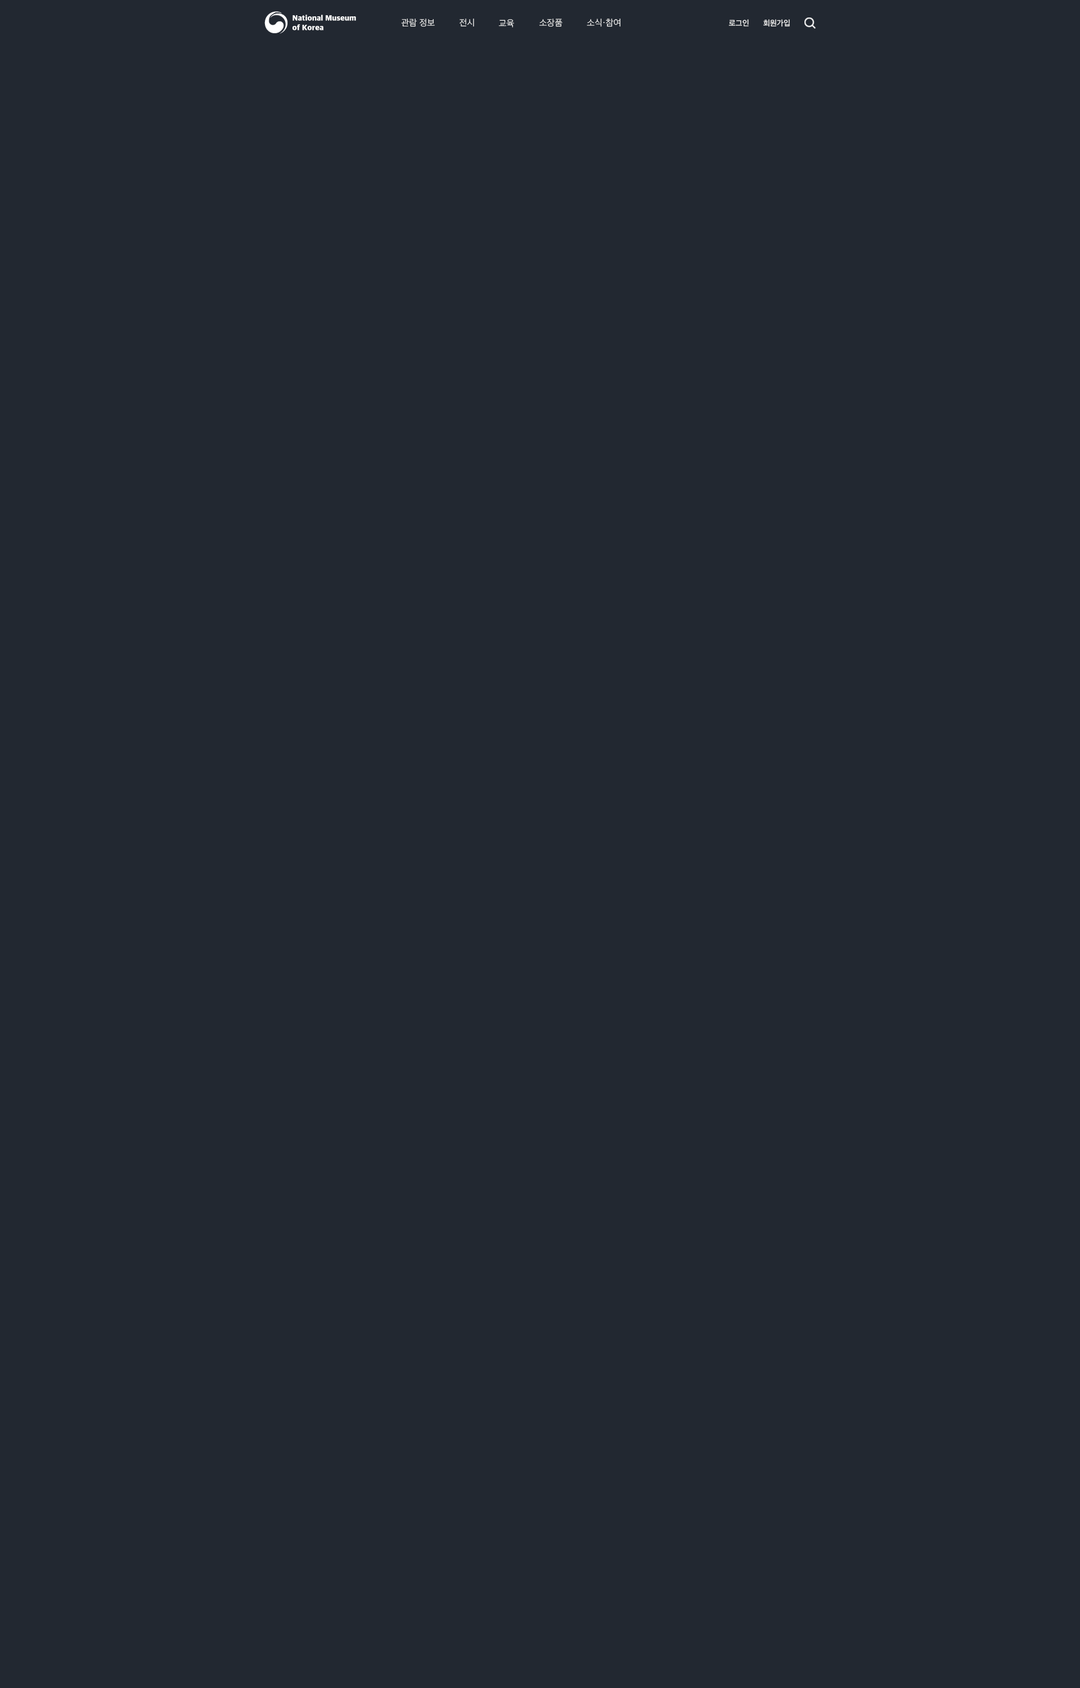
<style>
.page{position:relative;width:1080px;height:1688px;background:#222831}
.page>*{position:absolute;margin:0}
.t1{font:7.9px "AppleSDGothicNeoH00";color:#ffffff}
.t2{font:9px "AppleSDGothicNeoL00";color:#eeeeee}
.t3{font:9px "Gulim";color:#eeeeee}
.t4{font:7.9px "AppleSDGothicNeoM00";color:#eeeeee}
</style>
<div class="page">
<p class="t1" style="left:293px;top:15px;width:63px;height:15px">National Museum<br>of Korea</p>
<p class="t2" style="left:401px;top:19px;width:34px;height:8px">관람 정보</p>
<p class="t2" style="left:460px;top:19px;width:14px;height:8px">전시</p>
<p class="t2" style="left:498px;top:19px;width:16px;height:9px">교육</p>
<p class="t2" style="left:539px;top:19px;width:24px;height:8px">소장품</p>
<p class="t2" style="left:587px;top:19px;width:33px;height:8px">소식<span class="t3">·</span>참여</p>
<p class="t4" style="left:728px;top:19px;width:21px;height:7px">로그인</p>
<p class="t4" style="left:763px;top:19px;width:27px;height:8px">회원가입</p>
</div>
